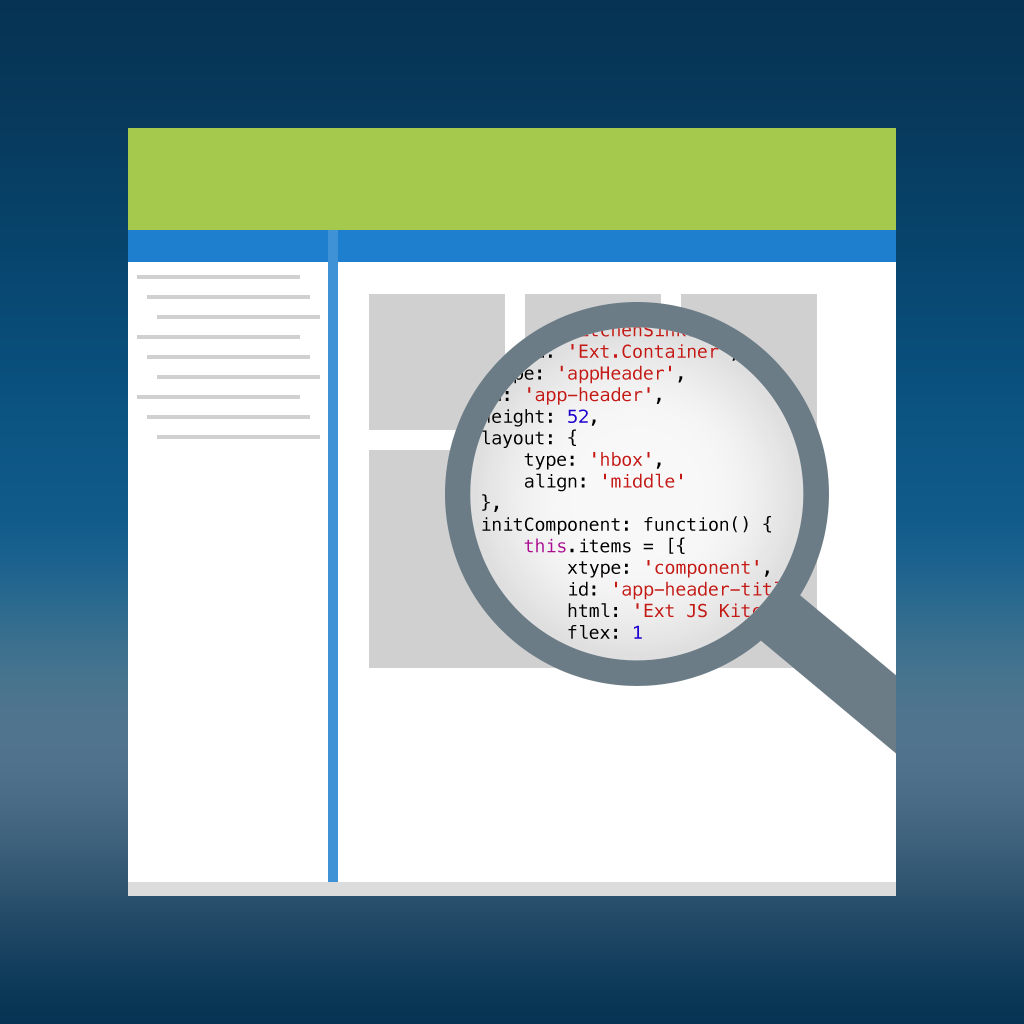
<style>
.page{position:relative;width:1024px;height:1024px;background:#ffffff}
.page>*{position:absolute;margin:0}
.t1{font:18px "Menlo-Regular";color:#000000}
.t2{font:18px "Menlo-Regular";color:#c41a16}
.t3{font:18px "Menlo-Regular";color:#1c00cf}
.t4{font:18px "Menlo-Regular";color:#aa0d91}
</style>
<div class="page">
<p class="t1" style="left:438px;top:321px;width:429px;height:342px">Ext.define(<span class="t2">'KitchenSink.view.Header'</span>, {<br>    extend: <span class="t2">'Ext.Container'</span>,<br>    xtype: <span class="t2">'appHeader'</span>,<br>    id: <span class="t2">'app-header'</span>,<br>    height: <span class="t3">52</span>,<br>    layout: {<br>        type: <span class="t2">'hbox'</span>,<br>        align: <span class="t2">'middle'<br></span>    },<br>    initComponent: function() {<br>        <span class="t4">this</span>.items = [{<br>            xtype: <span class="t2">'component'</span>,<br>            id: <span class="t2">'app-header-title'</span>,<br>            html: <span class="t2">'Ext JS Kitchen Sink'</span>,<br>            flex: <span class="t3">1<br></span>        }];<br><br>        <span class="t4">if </span>(!Ext.getCmp(<span class="t2">'options-toolbar'</span>)) {<br>            <span class="t4">this</span>.items.push({<br>                xtype: <span class="t2">'themeSwitcher'<br></span>            });<br>        }<br><br>        this.callParent();<br>    }</p>
</div>
